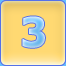
<style>
.page{position:relative;width:66px;height:66px}
.page>*{position:absolute;margin:0}
.t1{font:41px "Tahoma-Bold"}
</style>
<div class="page">
<p class="t1" style="left:22px;top:16px;width:23px;height:32px">3</p>
<p class="t1" style="left:22px;top:16px;width:23px;height:32px">3</p>
</div>
